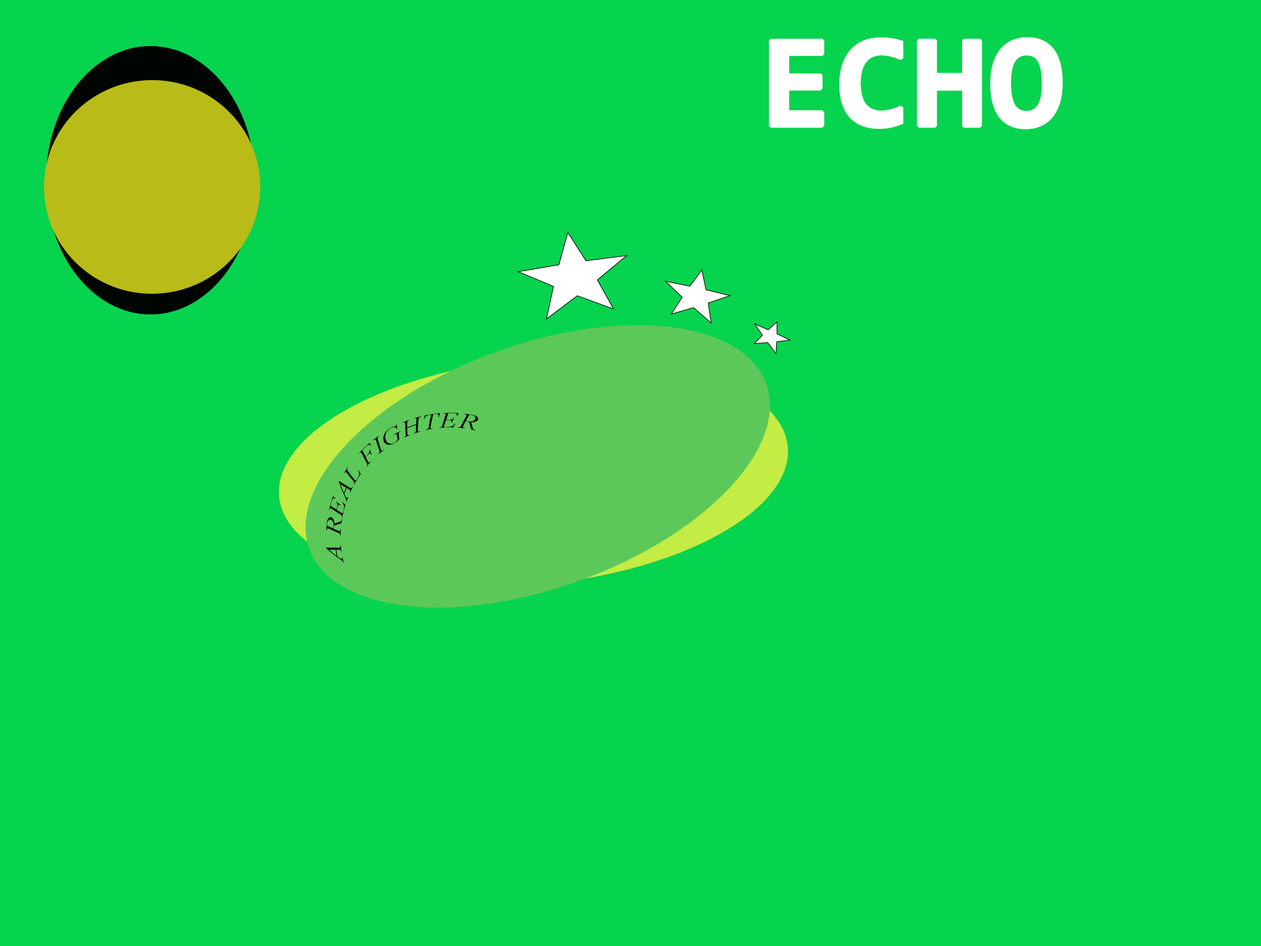
<style>
.page{position:relative;width:1261px;height:946px;background:#06d34e}
.page>*{position:absolute;margin:0}
.t1{font:133.5px "Consolas-Bold";color:#ffffff;text-transform:uppercase;font-weight:bold}
.t2{font:21.8px "TimesNewRomanPS-ItalicMT";color:#000000;text-transform:uppercase}
</style>
<div class="page">
<p class="t1" style="left:769px;top:37px;width:294px;height:92px">echo</p>
<p class="t2" style="left:326px;top:412px;width:152px;height:151px;rotate:-45deg">a real fighter</p>
</div>
